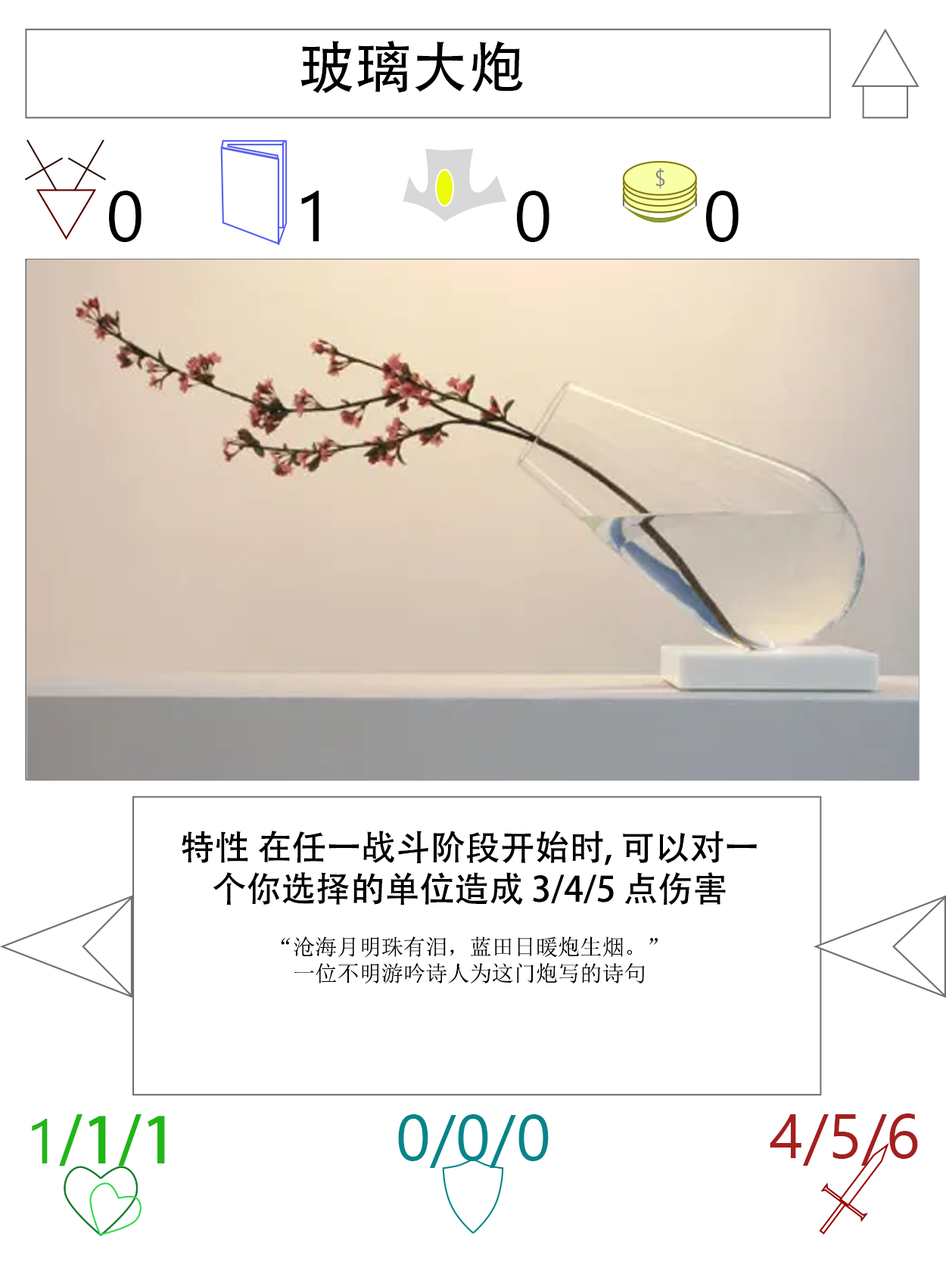
<style>
.page{position:relative;width:946px;height:1261px;background:#ffffff}
.page>*{position:absolute;margin:0}
.t1{font:56.7px "AdobeHeitiStd-Regular";color:#000000}
.t2{font:70.9px "SegoeUI";color:#000000}
.t3{font:34.7px "AdobeHeitiStd-Regular";color:#000000}
.t4{font:22.1px "SimSun";color:#000000}
.t5{font:63px "AdobeHeitiStd-Regular";color:#22b518}
.t6{font:63px "SegoeUI";color:#22b518}
.t7{font:64.6px "SegoeUI";color:#05868a}
.t8{font:63px "SegoeUI";color:#a32020}
</style>
<div class="page">
<p class="t1" style="left:300px;top:40px;width:223px;height:54px">玻璃大炮</p>
<p class="t2" style="left:109px;top:191px;width:32px;height:51px">0</p>
<p class="t2" style="left:301px;top:191px;width:18px;height:50px">1</p>
<p class="t2" style="left:517px;top:191px;width:32px;height:51px">0</p>
<p class="t2" style="left:706px;top:191px;width:32px;height:51px">0</p>
<p class="t3" style="left:182px;top:831px;width:574px;height:153px;text-align:center">特性 在任一战斗阶段开始时, 可以对一个你选择的单位造成 3/4/5 点伤害<br><br><span class="t4">“沧海月明珠有泪，蓝田日暖炮生烟。” <br>一位不明游吟诗人为这门炮写的诗句</span></p>
<p class="t5" style="left:32px;top:1114px;width:133px;height:52px"><span class="t6">1</span>/1/1</p>
<p class="t7" style="left:398px;top:1114px;width:150px;height:54px">0/0/0</p>
<p class="t8" style="left:769px;top:1114px;width:149px;height:52px">4/5/6</p>
</div>
